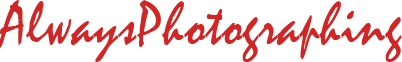
<style>
.page{position:relative;width:402px;height:62px;background:#ffffff}
.page>*{position:absolute;margin:0}
.t1{font:62.4px "CASMIRA";letter-spacing:0.01em;color:#d02626;scale:0.92 1}
</style>
<div class="page">
<p class="t1" style="left:0px;top:0px;width:402px;height:62px">AlwaysPhotographing</p>
</div>
